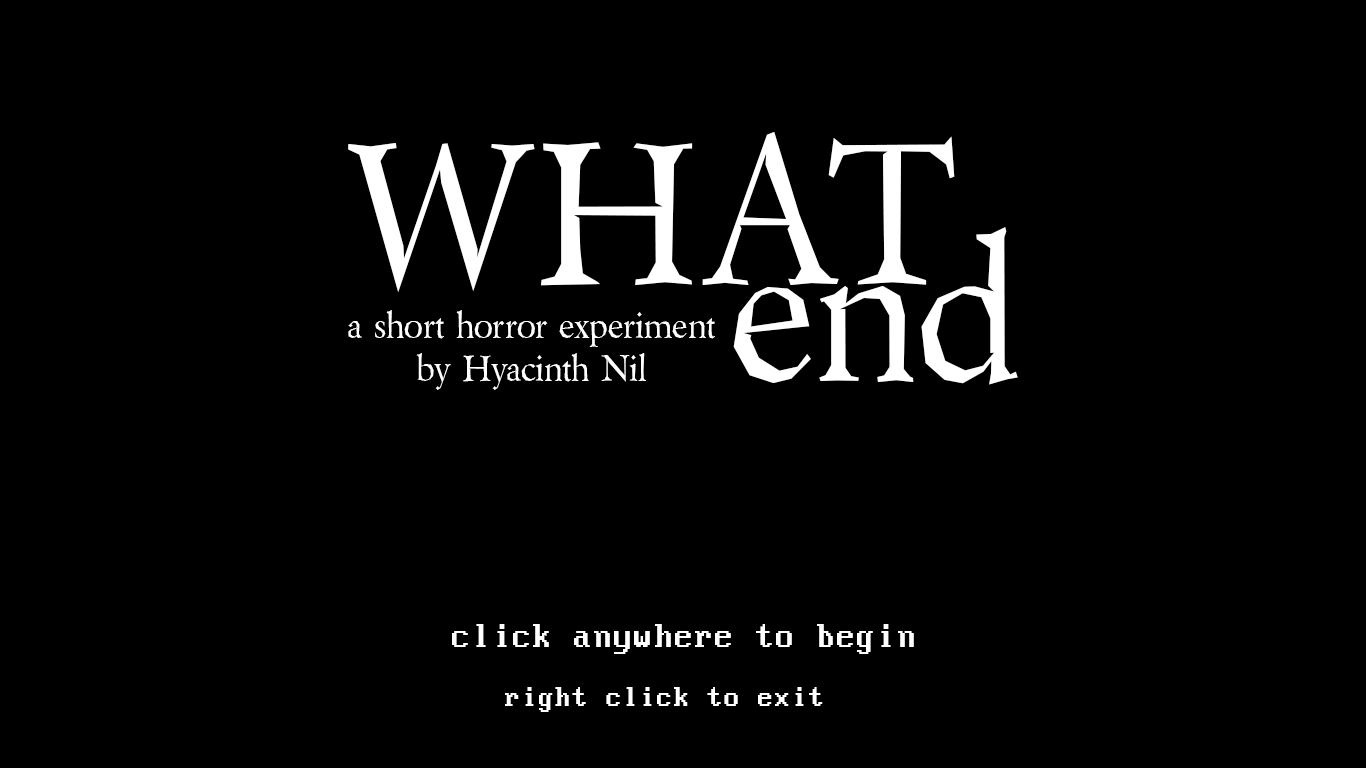
<style>
.page{position:relative;width:1366px;height:768px;background:#000000}
.page>*{position:absolute;margin:0}
.t1{font:200px "Berylium";color:#ffffff}
.t2{font:36px "Berylium";color:#ffffff}
.t3{font:36px "PerfectDOSVGA437";color:#ffffff}
.t4{font:30px "PerfectDOSVGA437";color:#ffffff}
</style>
<div class="page">
<p class="t1" style="left:348px;top:132px;width:607px;height:160px">WHAT</p>
<p class="t1" style="left:733px;top:227px;width:285px;height:158px">end</p>
<p class="t2" style="left:348px;top:310px;width:367px;height:80px;text-align:center">a short horror experiment<br>by Hyacinth Nil</p>
<p class="t3" style="left:452px;top:624px;width:462px;height:30px">click anywhere to begin</p>
<p class="t4" style="left:505px;top:687px;width:318px;height:25px">right click to exit</p>
</div>
